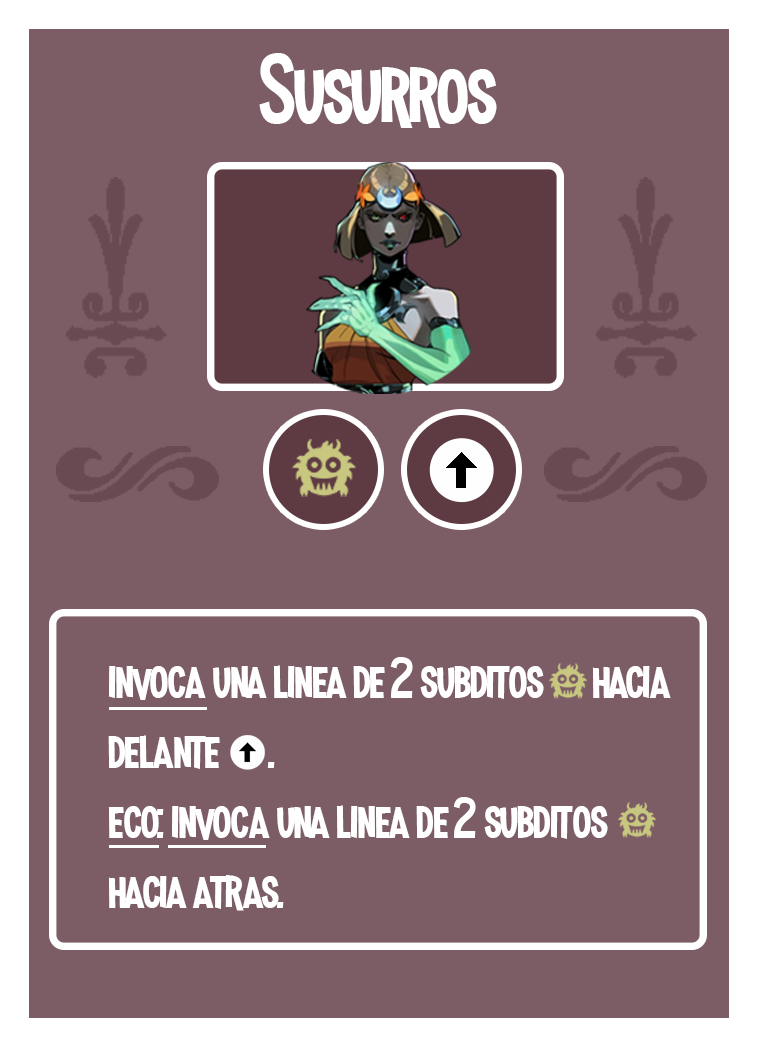
<style>
.page{position:relative;width:758px;height:1047px;background:#7d5d65}
.page>*{position:absolute;margin:0}
.t1{font:100px "MadnessHyperactive";color:#ffffff}
.t2{font:58.3px "MadnessHyperactive";color:#ffffff}
</style>
<div class="page">
<p class="t1" style="left:259px;top:53px;width:238px;height:75px">Susurros</p>
<p class="t2" style="left:108px;top:657px;width:563px;height:254px">invoca una linea de 2 subditos      hacia delante      .<br>eco: invoca una linea de 2 subditos      hacia atras.</p>
</div>
